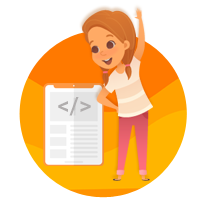
<style>
.page{position:relative;width:210px;height:210px;background:#ffffff}
.page>*{position:absolute;margin:0}
.t1{font:24px "Roboto-Medium";color:#b0adad}
</style>
<div class="page">
<p class="t1" style="left:58px;top:97px;width:33px;height:19px">&lt;/&gt;</p>
</div>
